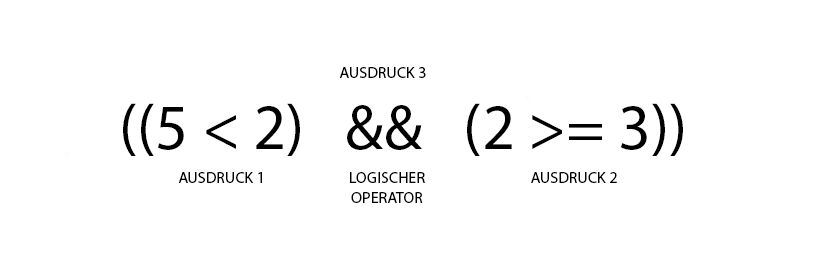
<style>
.page{position:relative;width:813px;height:262px;background:#ffffff}
.page>*{position:absolute;margin:0}
.t1{font:16px "MyriadPro-Regular";color:#000000}
.t2{font:64px "MyriadPro-Regular";color:#000000}
</style>
<div class="page">
<p class="t1" style="left:339px;top:67px;width:87px;height:11px">AUSDRUCK 3</p>
<p class="t2" style="left:123px;top:103px;width:560px;height:53px">((5 &lt; 2)   &amp;&amp;   (2 &gt;= 3))</p>
<p class="t1" style="left:178px;top:172px;width:84px;height:11px">AUSDRUCK 1</p>
<p class="t1" style="left:350px;top:172px;width:75px;height:31px;text-align:center">LOGISCHER OPERATOR</p>
<p class="t1" style="left:531px;top:172px;width:86px;height:11px">AUSDRUCK 2</p>
</div>
